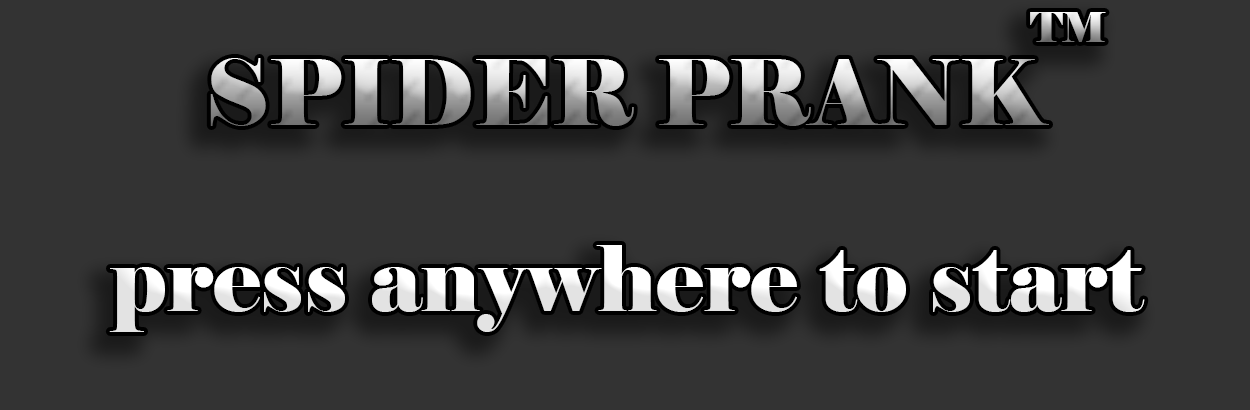
<style>
.page{position:relative;width:1250px;height:410px;background:#333333}
.page>*{position:absolute;margin:0}
.t1{font:40.8px "Elephant-Regular"}
.t2{font:89.8px "Elephant-Regular"}
.t3{font:89.8px "Elephant-Regular";color:#ffffff}
</style>
<div class="page">
<p class="t1" style="left:1030px;top:12px;width:76px;height:30px">TM</p>
<p class="t2" style="left:210px;top:58px;width:839px;height:68px">SPIDER PRANK</p>
<p class="t3" style="left:109px;top:245px;width:1036px;height:87px">press anywhere to start</p>
</div>
